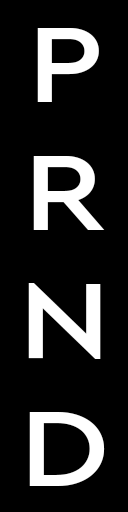
<style>
.page{position:relative;width:128px;height:512px;background:#000000}
.page>*{position:absolute;margin:0}
.t1{font:112.3px/128px "CeraPROModern-Medium";color:#ffffff;scale:1.17 1}
</style>
<div class="page">
<p class="t1" style="left:28px;top:28px;width:77px;height:458px;text-align:center">P<br>R<br>N<br>D</p>
</div>
